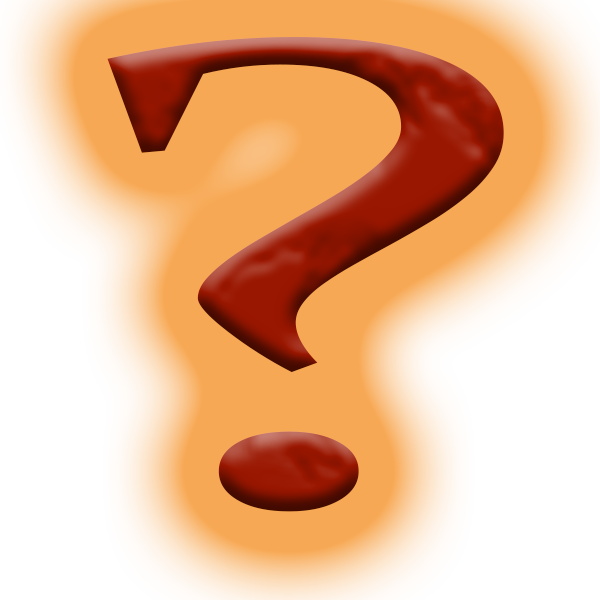
<style>
.page{position:relative;width:600px;height:600px;background:#f7a854}
.page>*{position:absolute;margin:0}
.t1{font:686.5px "Constantia";scale:1.74 1}
</style>
<div class="page">
<p class="t1" style="left:107px;top:37px;width:397px;height:475px">?</p>
</div>
